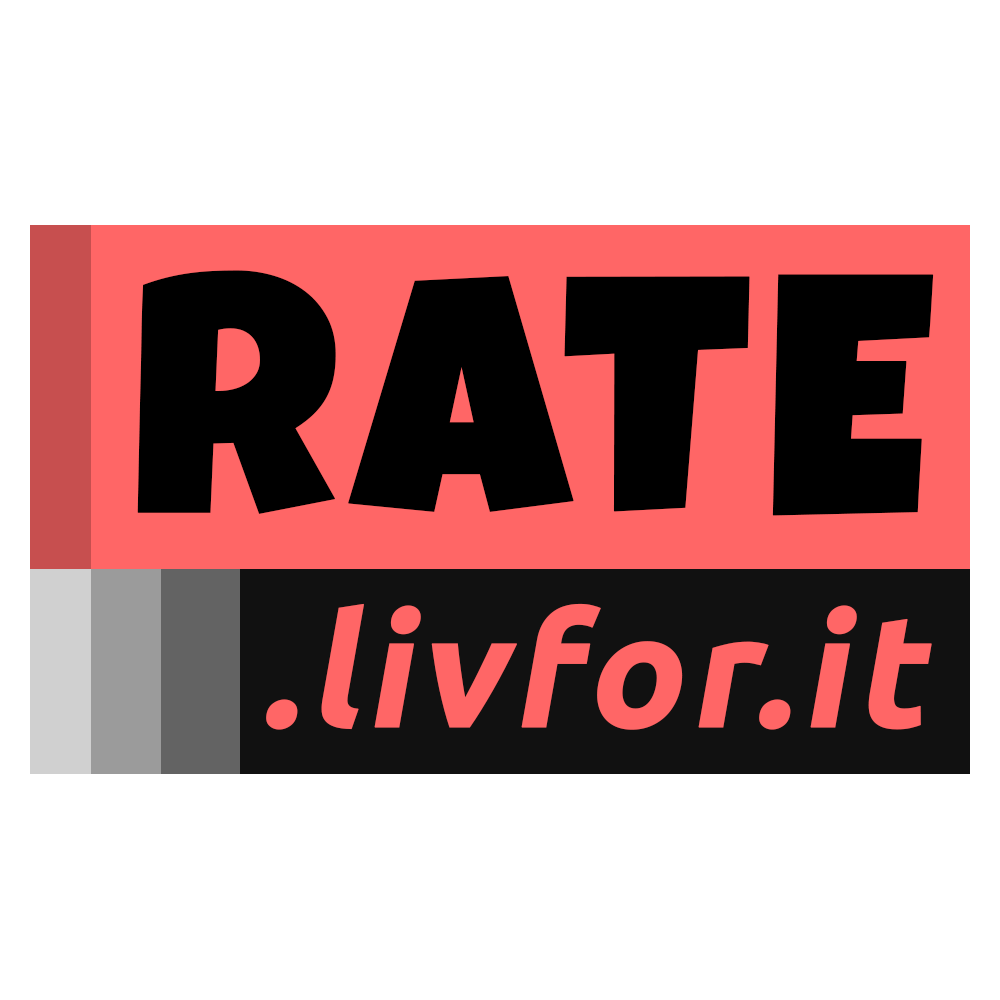
<style>
.page{position:relative;width:1000px;height:1000px;background:#ffffff}
.page>*{position:absolute;margin:0}
.t1{font:341.3px "LuckiestGuy-Regular";letter-spacing:0.02em;color:#000000;font-weight:bold}
.t2{font:158.5px "Ubuntu-Bold";letter-spacing:0.02em;color:#ff6666;font-weight:bold;font-style:italic}
</style>
<div class="page">
<p class="t1" style="left:137px;top:270px;width:797px;height:246px">RATE</p>
<p class="t2" style="left:266px;top:603px;width:666px;height:127px">.livfor.it</p>
</div>
